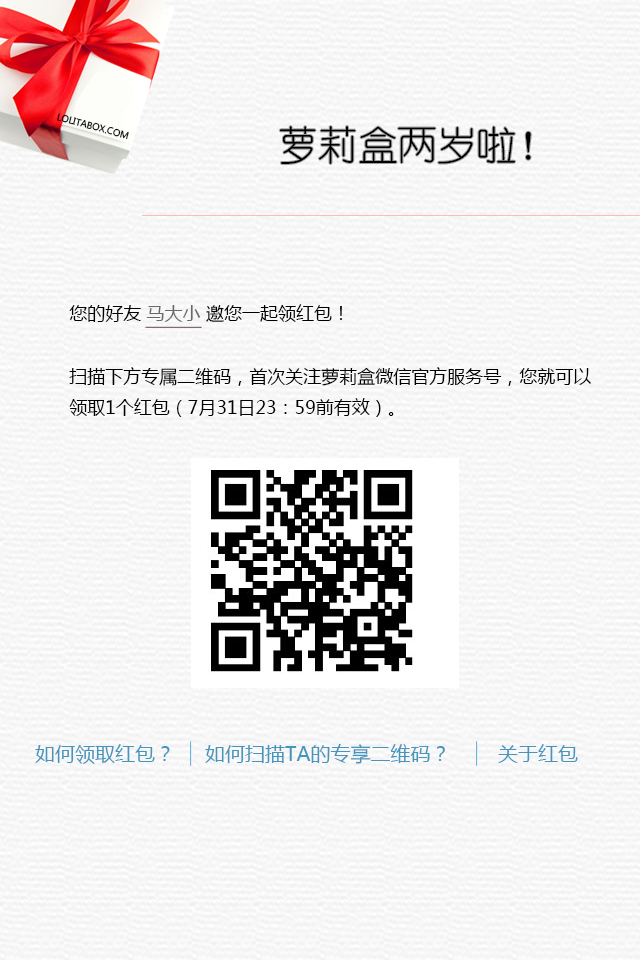
<style>
.page{position:relative;width:640px;height:960px}
.page>*{position:absolute;margin:0}
.t1{font:9px "MicrosoftYaHei";color:#000000}
.t2{font:39.8px "YouYuan";color:#000000}
.t3{font:18px "MicrosoftYaHei";color:#000000}
.t4{font:18px "MicrosoftYaHei";color:#696969}
.t5{font:20px "MicrosoftYaHei";color:#4695bd}
</style>
<div class="page">
<p class="t1" style="left:57px;top:113px;width:72px;height:27px;rotate:15deg">LOLITABOX.COM</p>
<p class="t2" style="left:279px;top:126px;width:252px;height:38px">萝莉盒两岁啦！</p>
<p class="t3" style="left:69px;top:304px;width:522px;height:113px">您的好友 <span class="t4">马大小</span> 邀您一起领红包！  <br><br> 扫描下方专属二维码，首次关注萝莉盒微信官方服务号，您就可以<br> 领取1个红包（7月31日23：59前有效）。</p>
<p class="t5" style="left:35px;top:744px;width:135px;height:20px">如何领取红包？</p>
<p class="t5" style="left:205px;top:744px;width:240px;height:20px">如何扫描TA的专享二维码？</p>
<p class="t5" style="left:498px;top:744px;width:80px;height:19px">关于红包</p>
</div>
